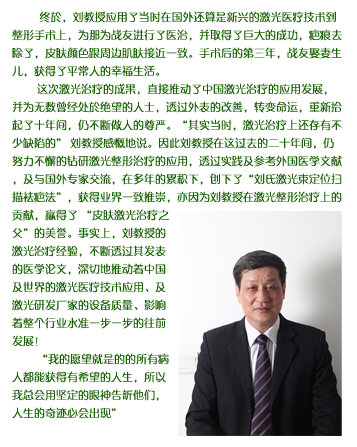
<style>
.page{position:relative;width:357px;height:447px;background:#ffffff}
.page>*{position:absolute;margin:0}
.t1{font:11px/18px "FZZQJW--GB1-0";color:#196003}
.t2{font:11px/18px "FZZQJW--GB1-0";color:#061b00;font-weight:bold;font-style:italic}
.t3{font:11px/18px "STXihei";color:#196003}
</style>
<div class="page">
<p class="t1" style="left:11px;top:11px;width:331px;height:408px"><span class="t2">        </span>终於，刘教授应用了当时在国外还算是新兴的激光医疗技术到整形手术上，为那为战友进行了医治，并取得了巨大的成功，疤痕去除了，皮肤颜色跟周边肌肤接近一致。手术后的第三年，战友娶妻生儿，获得了平常人的幸福生活。<br>        这次激光治疗的成果，直接推动了中国激光治疗的应用发展，并为无数曾经处於绝望的人士，透过外表的改善，转变命运，重新拾起了十年间，仍不断做人的尊严。“其实当时，激光治疗上还存有不少缺陷的” 刘教授感慨地说。因此刘教授在这过去的二十年间，仍努力不懈的钻研激光整形治疗的应用，透过实践及参考外国医学文献，及与国外专家交流，在多年的累积下，创下了“刘氏激光束定位扫描祛疤法”，获得业界一致推崇，亦因为刘教授在激光整形治疗上的贡献，赢得了 “皮肤激光治疗之<br>父”的美誉。事实上，刘教授的<br>激光治疗经验，不断透过其发表<br>的医学论文，深切地推动着中国<br>及世界的激光医疗技术应用、及<br>激光研发厂家的设备质量、影响<br>着整个行业水准一步一步的往前<br>发展！<br>        “我的愿望就是的的所有病<br>人都能获得有希望的人生，所以<br>我总会用坚定的眼神告<span class="t3">訢</span>他们，<br>人生的奇迹必会出现”</p>
</div>
